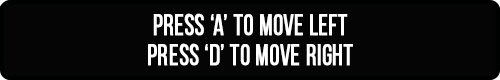
<style>
.page{position:relative;width:500px;height:80px;background:#050505}
.page>*{position:absolute;margin:0}
.t1{font:30px "BebasNeueRegular";letter-spacing:0.005em;color:#ffffff;font-weight:bold;scale:0.83 1}
</style>
<div class="page">
<p class="t1" style="left:153px;top:13px;width:195px;height:23px">press ‘a’ to move left</p>
<p class="t1" style="left:148px;top:43px;width:205px;height:23px">press ‘d’ to move right</p>
</div>
